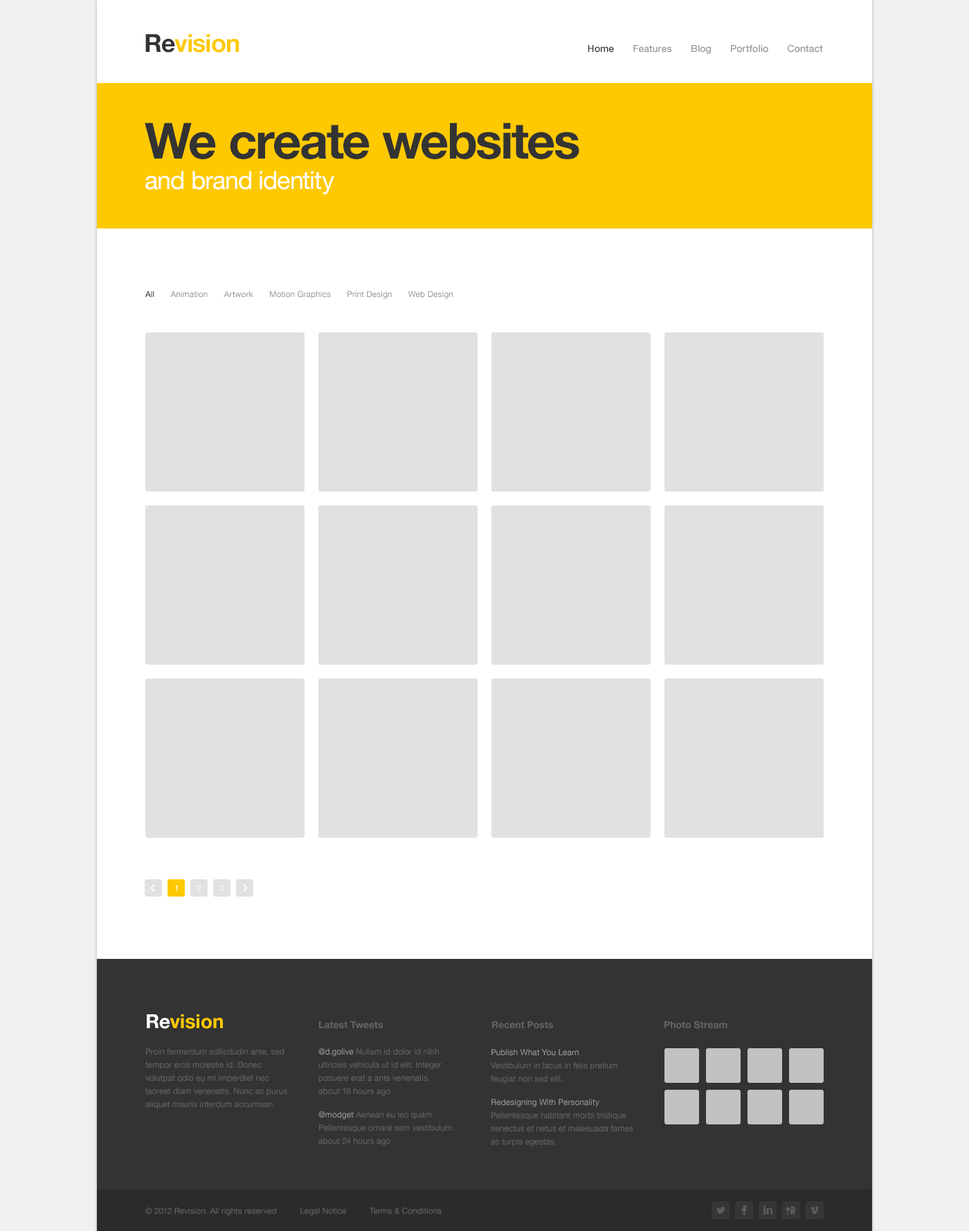
<style>
.page{position:relative;width:969px;height:1231px;background:#ffffff}
.page>*{position:absolute;margin:0}
.t1{font:24.9px "HelveticaNeue-Bold";letter-spacing:-0.025em;color:#fec901}
.t2{font:24.9px "HelveticaNeue-Bold";letter-spacing:-0.025em;color:#333333}
.t3{font:9.7px "HelveticaNeue-Medium";color:#959595}
.t4{font:9.7px "HelveticaNeue-Medium";color:#333333}
.t5{font:49.8px "HelveticaNeue-Bold";letter-spacing:-0.025em;color:#333333}
.t6{font:24.9px "HelveticaNeue";letter-spacing:-0.025em;color:#ffffff}
.t7{font:8.3px "HelveticaNeue";color:#959595}
.t8{font:8.3px "HelveticaNeue";color:#000000}
.t9{font:19.4px "HelveticaNeue-Bold";color:#fec901}
.t10{font:19.4px "HelveticaNeue-Bold";color:#ffffff}
.t11{font:9.7px "HelveticaNeue-Bold";color:#636363}
.t12{font:8.3px/13.2px "HelveticaNeue";color:#636363}
.t13{font:8.3px/13.2px "HelveticaNeue";color:#959595}
.t14{font:8.3px "HelveticaNeue";color:#636363}
</style>
<div class="page">
<p class="t1" style="left:145px;top:34px;width:94px;height:19px"><span class="t2">Re</span>vision</p>
<p class="t3" style="left:588px;top:44px;width:235px;height:10px"><span class="t4">Home       </span>Features       Blog       Portfolio       Contact</p>
<p class="t5" style="left:145px;top:123px;width:434px;height:71px">We create websites<br><span class="t6">and brand identity</span></p>
<p class="t7" style="left:145px;top:291px;width:308px;height:8px"><span class="t8">All      </span> Animation       Artwork       Motion Graphics       Print Design       Web Design</p>
<p class="t9" style="left:147px;top:1014px;width:76px;height:15px"><span class="t10">Re</span>vision</p>
<p class="t11" style="left:319px;top:1021px;width:64px;height:8px">Latest Tweets</p>
<p class="t11" style="left:492px;top:1021px;width:61px;height:8px">Recent Posts</p>
<p class="t11" style="left:664px;top:1020px;width:63px;height:9px">Photo Stream</p>
<p class="t12" style="left:145px;top:1048px;width:142px;height:61px">Proin fermentum sollicitudin ante, sed tempor eros molestie id. Donec volutpat odio eu mi imperdiet nec laoreet diam venenatis. Nunc ac purus aliquet mauris interdum accumsan.</p>
<p class="t12" style="left:318px;top:1048px;width:136px;height:97px"><span class="t13">@d.golive </span>Nullam id dolor id nibh ultricies vehicula ut id elit. Integer posuere erat a ante venenatis.<br>about 18 hours ago<br><span class="t13">@modget </span>Aenean eu leo quam. Pellentesque ornare sem vestibulum.<br>about 24 hours ago</p>
<p class="t12" style="left:491px;top:1049px;width:142px;height:97px"><span class="t13">Publish What You Learn<br></span>Vestibulum in lacus in felis pretium feugiat non sed elit.<br><span class="t13">Redesigning With Personality<br></span>Pellentesque habitant morbi tristique senectus et netus et malesuada fames ac turpis egestas.</p>
<p class="t14" style="left:145px;top:1207px;width:297px;height:8px">© 2012 Revision. All rights reserved          Legal Notice          Terms &amp; Conditions</p>
</div>
